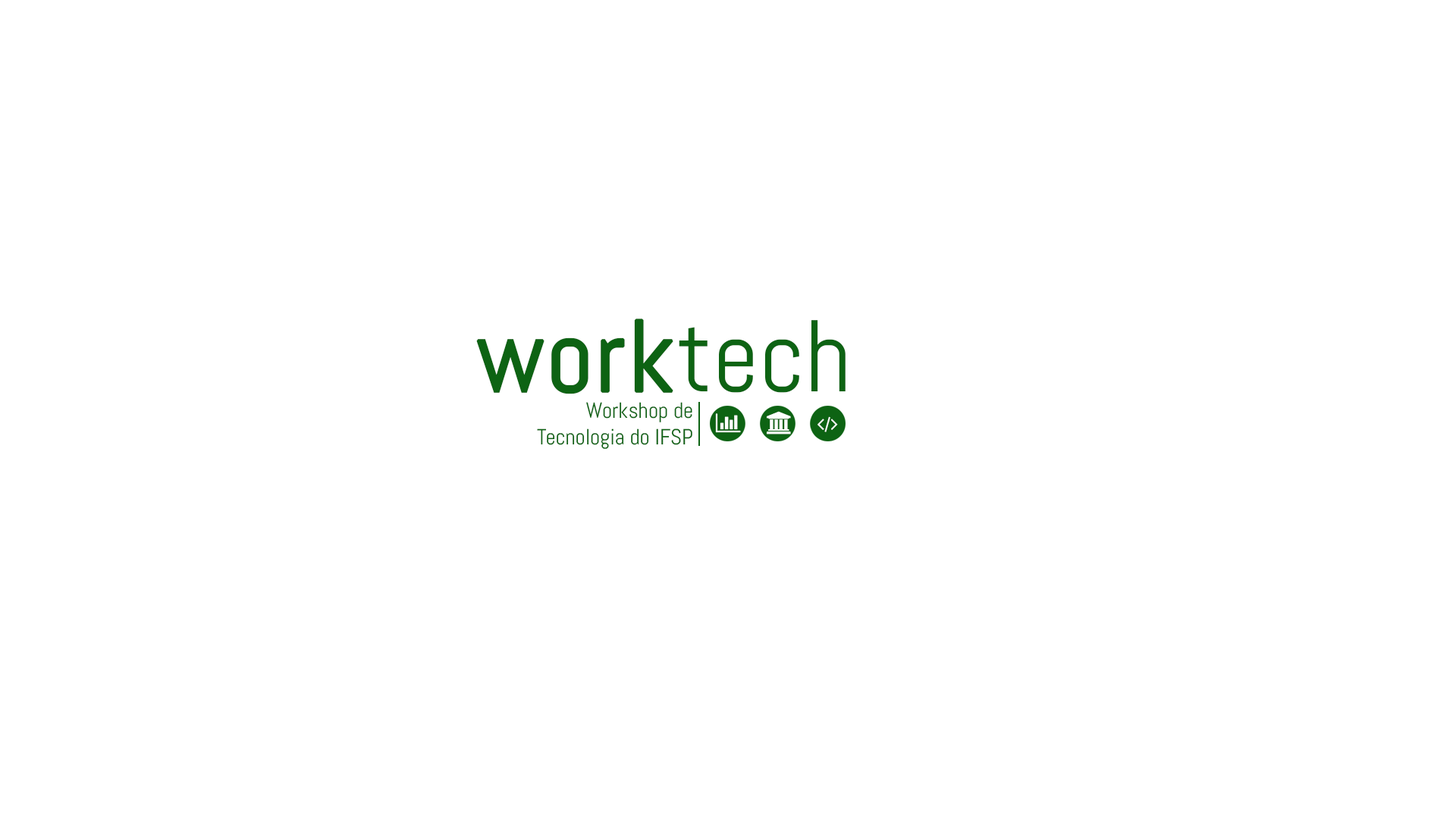
<style>
.page{position:relative;width:1456px;height:819px;background:#ffffff}
.page>*{position:absolute;margin:0}
.t1{font:101.9px "Abel-Regular";color:#0d6313;font-weight:bold}
.t2{font:101.9px "Abel-Regular";color:#0d6313}
.t3{font:22px "Abel-Regular";color:#0d6313}
</style>
<div class="page">
<p class="t1" style="left:476px;top:318px;width:370px;height:76px">work<span class="t2">tech</span></p>
<p class="t3" style="left:537px;top:402px;width:155px;height:47px;text-align:right">Workshop de<br>Tecnologia do IFSP</p>
</div>
